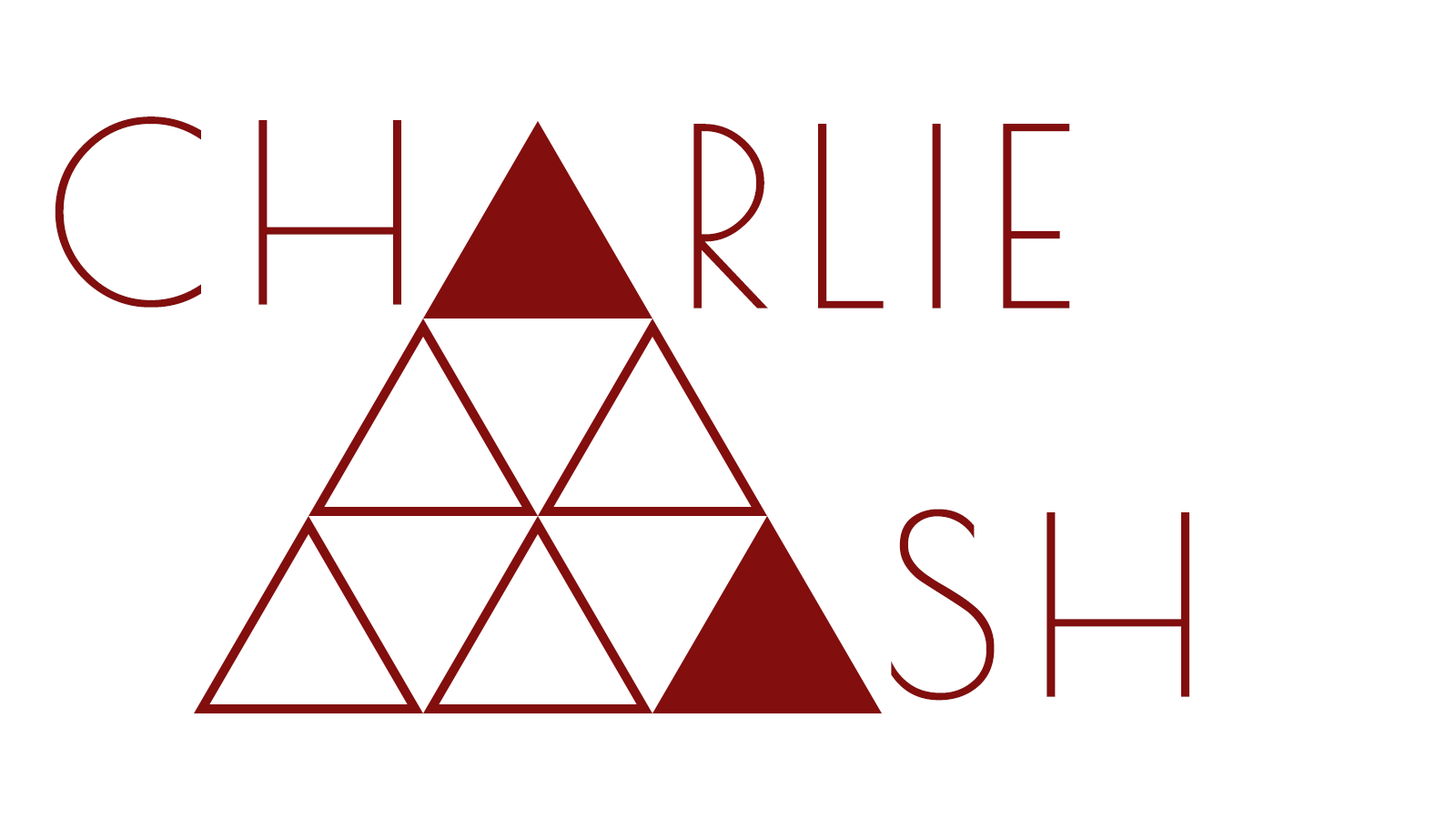
<style>
.page{position:relative;width:1456px;height:819px;background:#ffffff}
.page>*{position:absolute;margin:0}
.t1{font:245.7px "PoiretOne-Regular";letter-spacing:0.1em;color:#820e0e}
</style>
<div class="page">
<p class="t1" style="left:55px;top:116px;width:346px;height:192px">CH</p>
<p class="t1" style="left:693px;top:124px;width:377px;height:184px">RLIE</p>
<p class="t1" style="left:891px;top:509px;width:298px;height:192px">SH</p>
</div>
